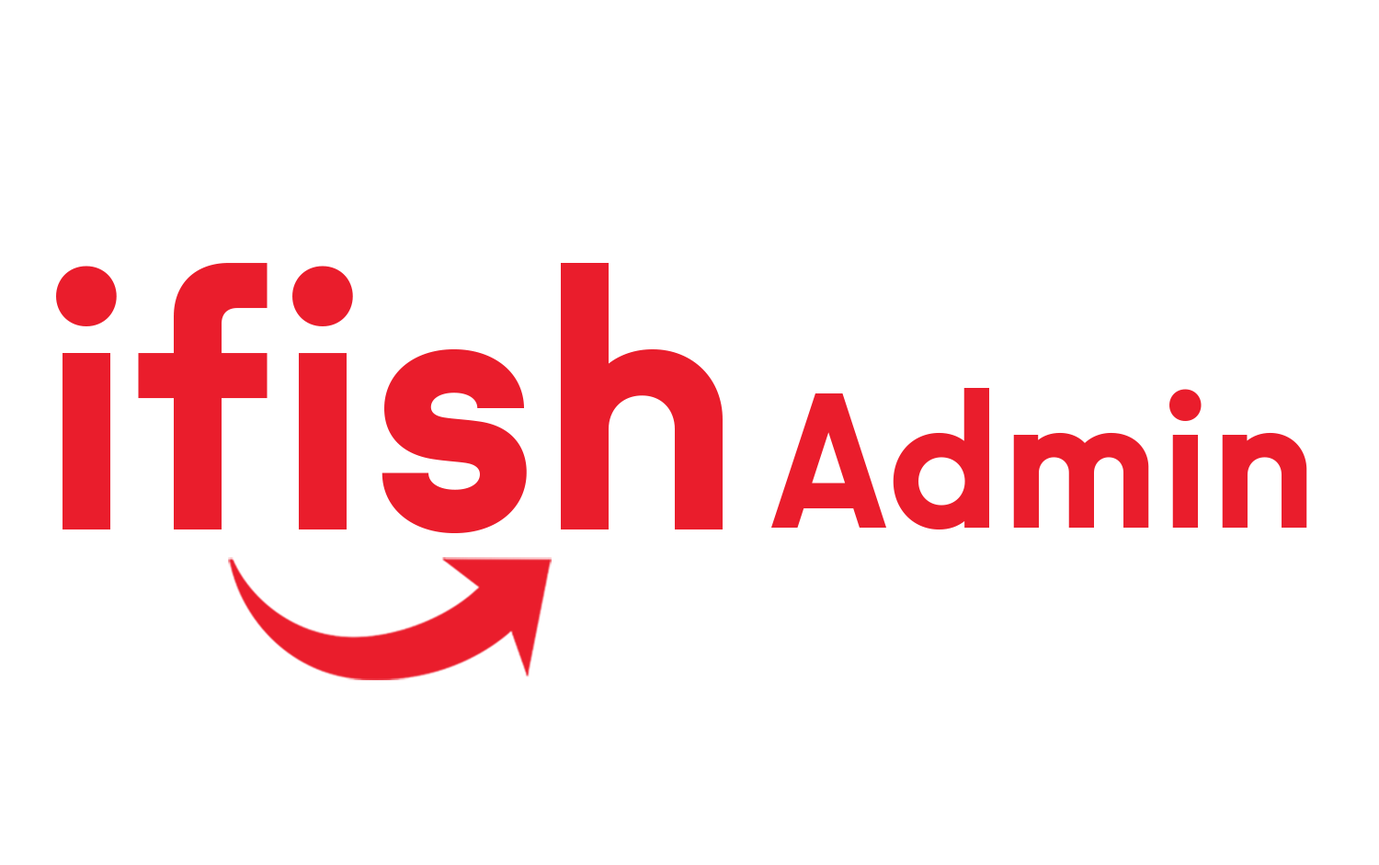
<style>
.page{position:relative;width:1379px;height:865px;background:#ffffff}
.page>*{position:absolute;margin:0}
.t1{font:350px "SulSans-Bold";color:#ea1d2c}
.t2{font:183.8px "SulSans-Bold";color:#ea1d2c}
</style>
<div class="page">
<p class="t1" style="left:56px;top:263px;width:666px;height:270px">ifish</p>
<p class="t2" style="left:771px;top:388px;width:536px;height:142px">Admin</p>
</div>
